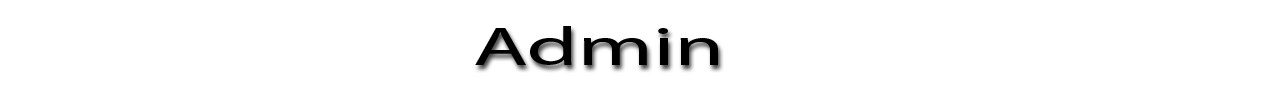
<style>
.page{position:relative;width:1280px;height:92px;background:#ffffff}
.page>*{position:absolute;margin:0}
.t1{font:54.3px "MyriadPro-Regular";color:#000000;scale:1.66 1}
</style>
<div class="page">
<p class="t1" style="left:475px;top:26px;width:243px;height:39px">Admin</p>
</div>
